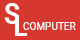
<style>
.page{position:relative;width:80px;height:40px;background:#d6372f}
.page>*{position:absolute;margin:0}
.t1{font:28.6px "Roboto-Bold";color:#fefefe;scale:0.91 1}
.t2{font:28.6px "Roboto-Bold";color:#ffffff;scale:0.91 1}
.t3{font:11px "Roboto-Regular";color:#ffffff;scale:0.91 1}
</style>
<div class="page">
<p class="t1" style="left:4px;top:3px;width:16px;height:21px">S</p>
<p class="t2" style="left:15px;top:15px;width:12px;height:21px">L</p>
<p class="t3" style="left:23px;top:22px;width:53px;height:8px">COMPUTER</p>
</div>
